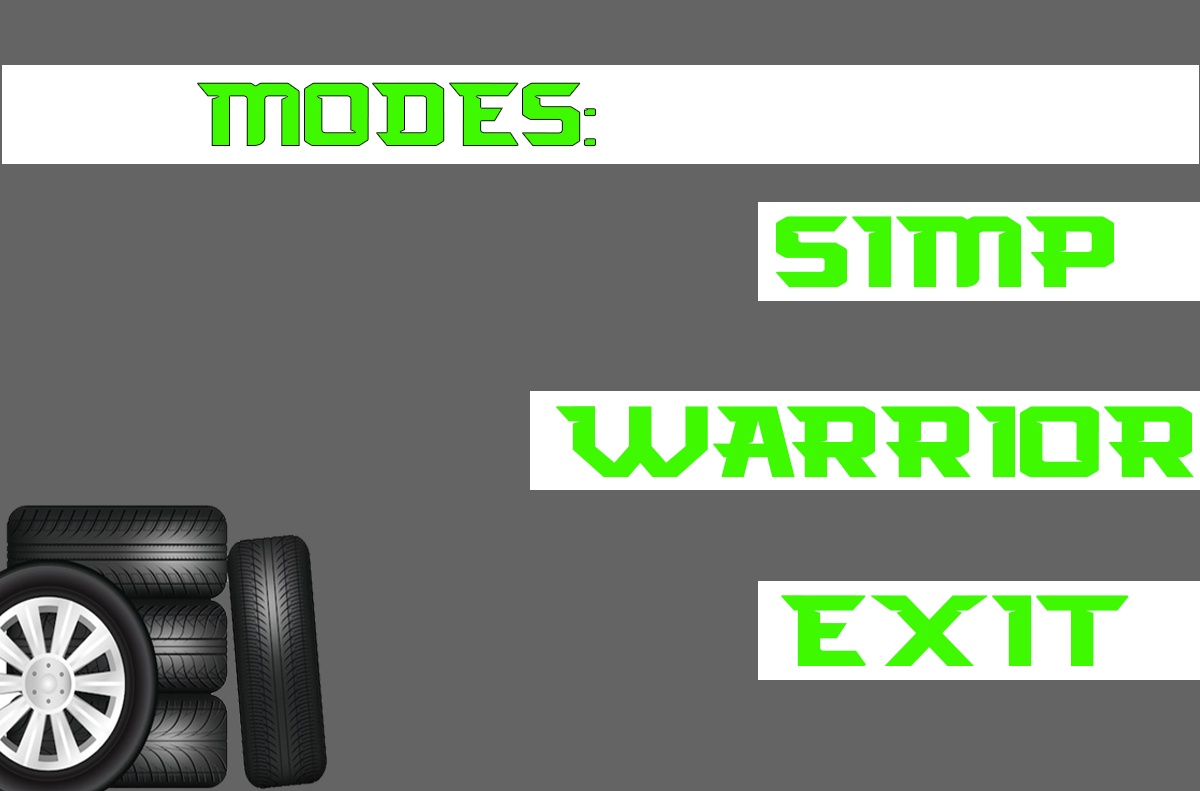
<style>
.page{position:relative;width:1200px;height:791px;background:#646464}
.page>*{position:absolute;margin:0}
.t1{font:84.5px "Arcades-Regular";color:#3ef900;scale:1.34 1}
.t2{font:94.2px "Arcades-Regular";color:#3ef900;scale:1.46 1}
</style>
<div class="page">
<p class="t1" style="left:197px;top:82px;width:399px;height:65px">MODES:</p>
<p class="t2" style="left:776px;top:216px;width:339px;height:72px">SIMP</p>
<p class="t2" style="left:556px;top:406px;width:638px;height:72px">WARRIOR</p>
<p class="t2" style="left:781px;top:595px;width:348px;height:71px">EXIT</p>
</div>
